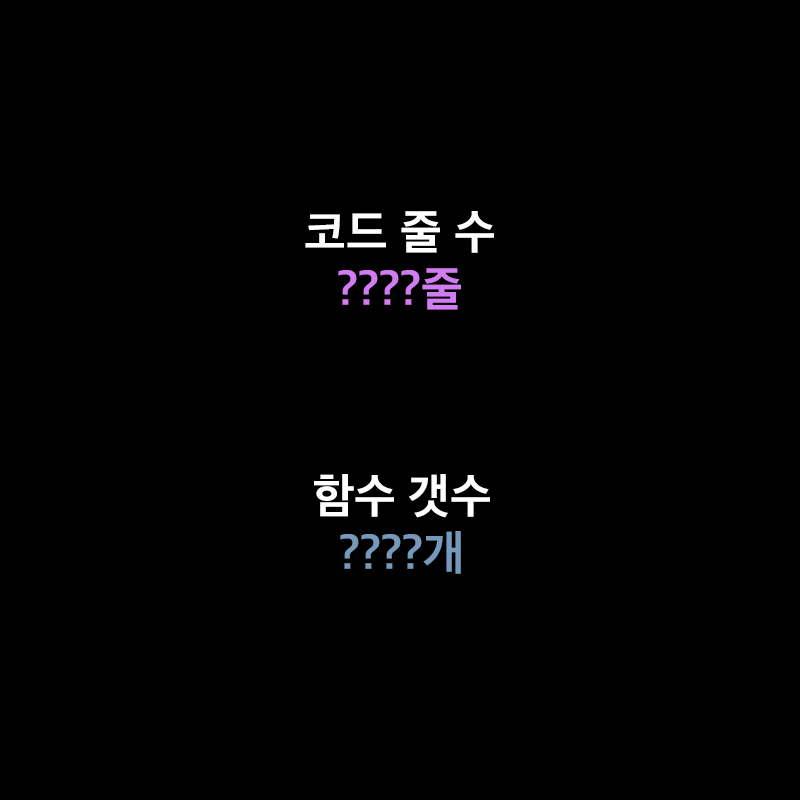
<style>
.page{position:relative;width:800px;height:800px;background:#000000}
.page>*{position:absolute;margin:0}
.t1{font:48px "AppleSDGothicNeoB00";color:#ffffff}
.t2{font:48px "AppleSDGothicNeoB00";color:#d17cf1}
.t3{font:48px "AppleSDGothicNeoB00";color:#7598bb}
</style>
<div class="page">
<p class="t1" style="left:305px;top:211px;width:189px;height:99px;text-align:center">코드 줄 수<br><span class="t2">????줄</span></p>
<p class="t1" style="left:314px;top:474px;width:176px;height:100px;text-align:center">함수 갯수<br><span class="t3">????개</span></p>
</div>
